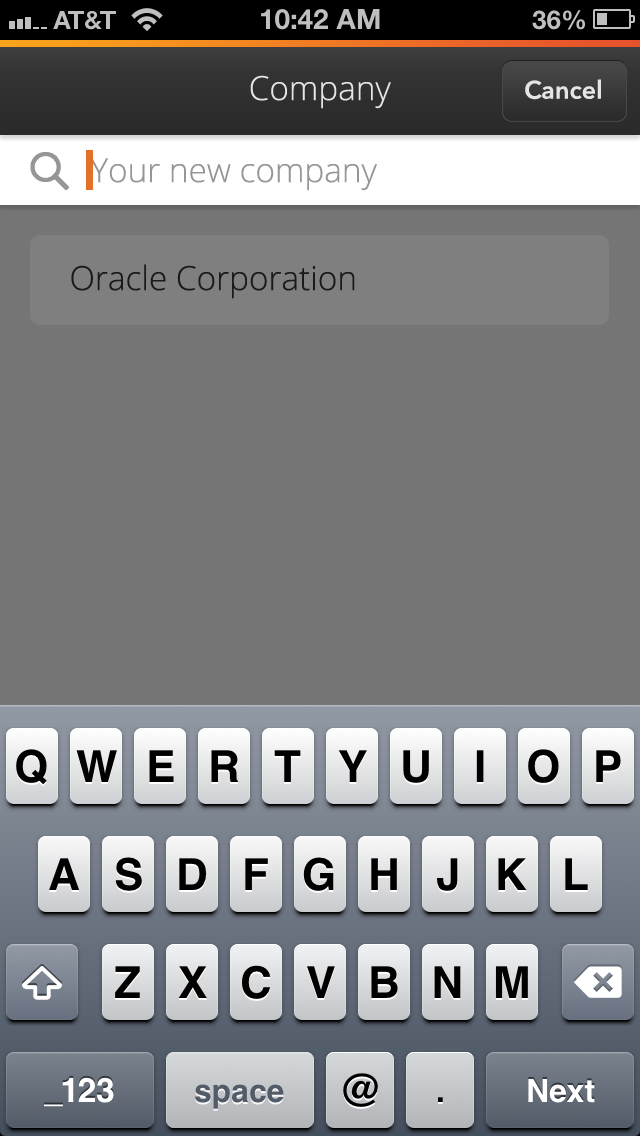
<style>
.page{position:relative;width:640px;height:1136px;background:#757575}
.page>*{position:absolute;margin:0}
.t1{font:33.3px "OpenSans-Light";color:#e5e5e5}
.t2{font:25px "AvenirNext-DemiBold";color:#e5e5e5}
.t3{font:33.3px "OpenSans-Light";color:#969696}
.t4{font:33.3px "OpenSans-Light";color:#1a1a1a}
</style>
<div class="page">
<p class="t1" style="left:250px;top:75px;width:141px;height:34px">Company</p>
<p class="t2" style="left:525px;top:79px;width:76px;height:21px">Cancel</p>
<p class="t3" style="left:90px;top:158px;width:287px;height:33px">Your new company</p>
<p class="t4" style="left:71px;top:264px;width:284px;height:35px">Oracle Corporation</p>
</div>
